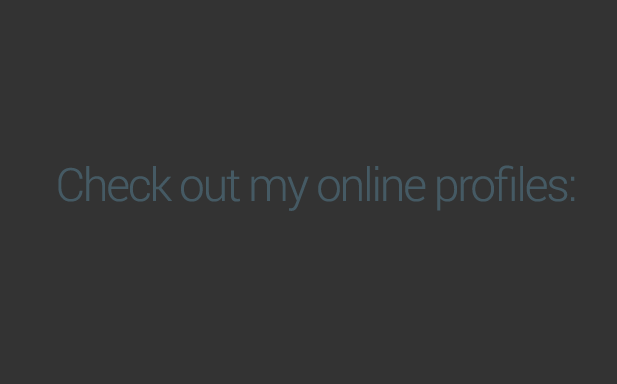
<style>
.page{position:relative;width:617px;height:384px;background:#333333}
.page>*{position:absolute;margin:0}
.t1{font:45.8px "Roboto-Light";letter-spacing:-0.045em;color:#455a64}
</style>
<div class="page">
<p class="t1" style="left:58px;top:165px;width:517px;height:46px">Check out my online profiles:</p>
</div>
